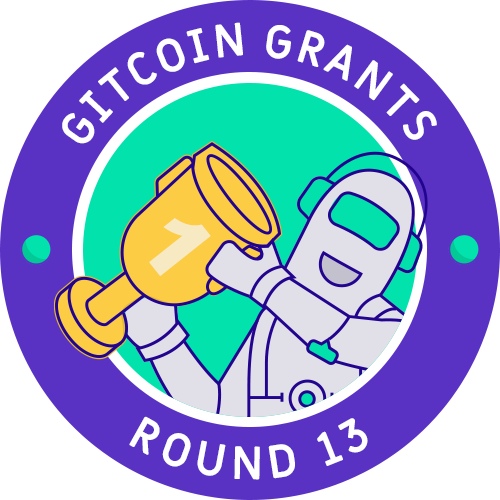
<style>
.page{position:relative;width:500px;height:500px;background:#5932c4}
.page>*{position:absolute;margin:0}
.t1{font:45.8px "MiriamLibre-Bold";color:#ffffff}
.t2{font:88.7px "Arial-Black";color:#f7eac3}
.t3{font:45.8px "MiriamLibre-Bold";letter-spacing:0.16em;color:#ffffff}
</style>
<div class="page">
<p class="t1" style="left:62px;top:22px;width:375px;height:122px;text-align:center">GITCOIN GRANTS</p>
<p class="t2" style="left:149px;top:218px;width:62px;height:58px;rotate:52deg">1</p>
<p class="t3" style="left:129px;top:416px;width:239px;height:64px">ROUND 13</p>
</div>
